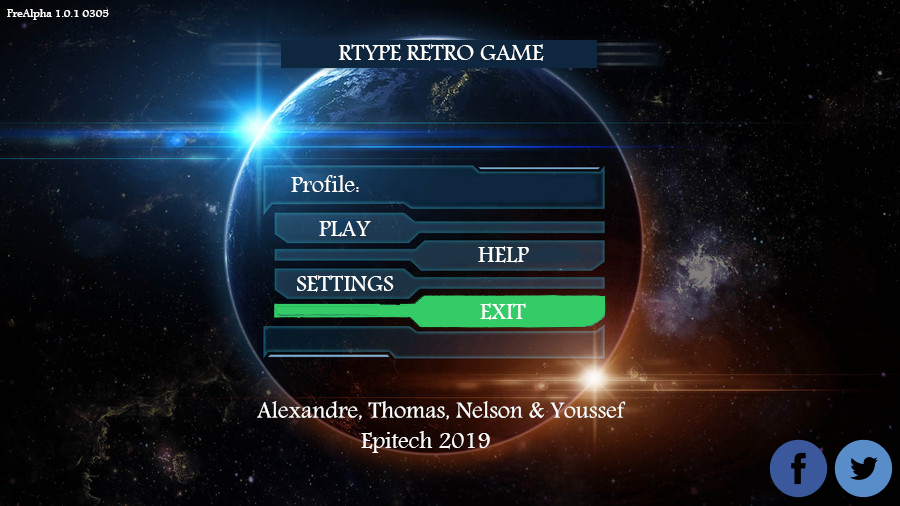
<style>
.page{position:relative;width:900px;height:506px}
.page>*{position:absolute;margin:0}
.t1{font:12px "Andalus";color:#ffffff}
.t2{font:24px "Andalus";color:#ffffff}
.t3{font:23.7px "Andalus";color:#ffffff}
</style>
<div class="page">
<p class="t1" style="left:7px;top:9px;width:102px;height:11px">PreAlpha 1.0.1 0305</p>
<p class="t2" style="left:339px;top:44px;width:205px;height:17px">RTYPE RETRO GAME</p>
<p class="t2" style="left:291px;top:175px;width:68px;height:17px">Profile:</p>
<p class="t2" style="left:319px;top:221px;width:52px;height:16px">PLAY</p>
<p class="t2" style="left:478px;top:246px;width:51px;height:17px">HELP</p>
<p class="t2" style="left:297px;top:275px;width:97px;height:17px">SETTINGS</p>
<p class="t2" style="left:480px;top:303px;width:46px;height:17px">EXIT</p>
<p class="t3" style="left:257px;top:401px;width:369px;height:19px">Alexandre, Thomas, Nelson &amp; Youssef</p>
<p class="t3" style="left:361px;top:431px;width:129px;height:22px">Epitech 2019</p>
</div>
